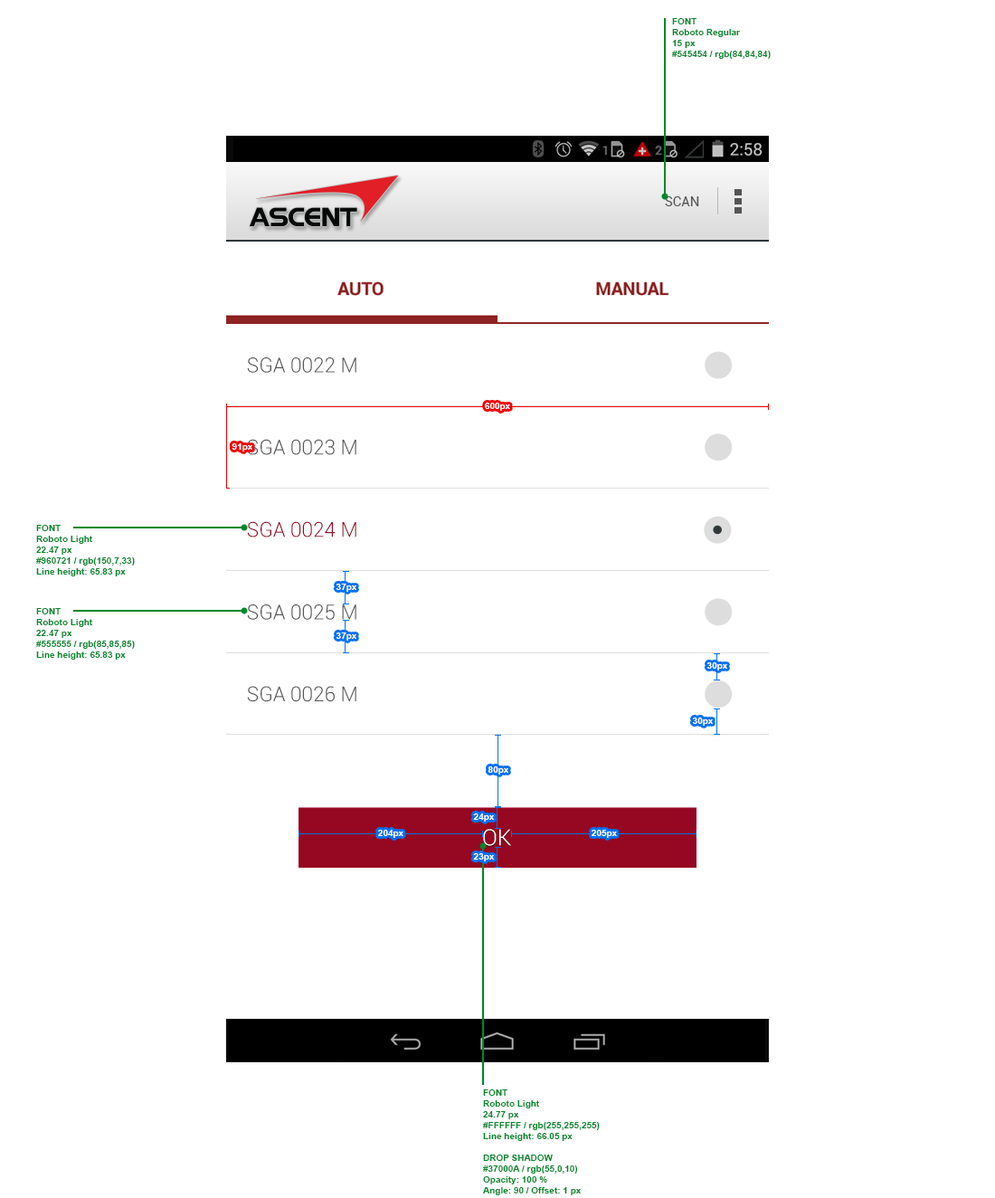
<style>
.page{position:relative;width:995px;height:1198px;background:#ffffff}
.page>*{position:absolute;margin:0}
.t1{font:9px "Arial-BoldMT";color:#00872b}
.t2{font:13.6px "Roboto-Regular";color:#545454}
.t3{font:20.3px "Roboto-Light";color:#555555}
.t4{font:9px "Arial-BoldMT";color:#ffffff}
.t5{font:20.3px "Roboto-Light";color:#960721}
.t6{font:22.4px "Roboto-Light";color:#ffffff}
</style>
<div class="page">
<p class="t1" style="left:672px;top:18px;width:99px;height:41px">FONT <br>Roboto Regular<br>15 px<br>#545454 / rgb(84,84,84)</p>
<p class="t2" style="left:665px;top:196px;width:34px;height:10px">SCAN</p>
<p class="t3" style="left:247px;top:357px;width:110px;height:16px">SGA 0022 M</p>
<p class="t4" style="left:485px;top:403px;width:25px;height:8px">600px</p>
<p class="t4" style="left:232px;top:443px;width:20px;height:9px">91px</p>
<p class="t3" style="left:247px;top:439px;width:110px;height:16px">SGA 0023 M</p>
<p class="t5" style="left:247px;top:521px;width:110px;height:16px">SGA 0024 M</p>
<p class="t1" style="left:36px;top:525px;width:99px;height:51px">FONT <br>Roboto Light<br>22.47 px<br>#960721 / rgb(150,7,33)<br>Line height: 65.83 px</p>
<p class="t4" style="left:336px;top:584px;width:21px;height:8px">37px</p>
<p class="t3" style="left:247px;top:604px;width:110px;height:16px">SGA 0025 M</p>
<p class="t1" style="left:36px;top:608px;width:99px;height:52px">FONT <br>Roboto Light<br>22.47 px<br>#555555 / rgb(85,85,85)<br>Line height: 65.83 px</p>
<p class="t4" style="left:336px;top:632px;width:21px;height:9px">37px</p>
<p class="t4" style="left:707px;top:662px;width:20px;height:8px">30px</p>
<p class="t3" style="left:247px;top:686px;width:110px;height:16px">SGA 0026 M</p>
<p class="t4" style="left:692px;top:718px;width:21px;height:8px">30px</p>
<p class="t4" style="left:488px;top:766px;width:21px;height:9px">80px</p>
<p class="t4" style="left:473px;top:813px;width:21px;height:9px">24px</p>
<p class="t4" style="left:378px;top:830px;width:26px;height:8px">204px</p>
<p class="t6" style="left:483px;top:829px;width:28px;height:17px">OK</p>
<p class="t4" style="left:592px;top:830px;width:25px;height:8px">205px</p>
<p class="t4" style="left:473px;top:853px;width:21px;height:8px">23px</p>
</div>
